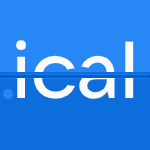
<style>
.page{position:relative;width:150px;height:150px;background:#2787f5}
.page>*{position:absolute;margin:0}
.t1{font:80px "VKSansDisplay-Medium";color:#fafafa}
.t2{font:80px "VKSansDisplay-Medium";letter-spacing:-0.09em;color:#2787f5}
</style>
<div class="page">
<p class="t1" style="left:3px;top:40px;width:131px;height:59px"><span class="t2">.</span>ical</p>
</div>
